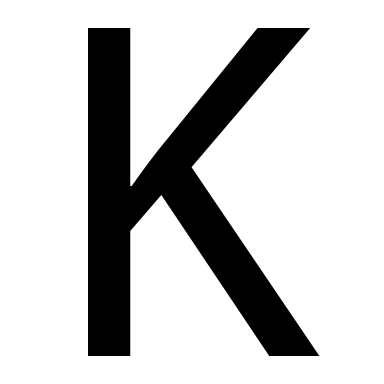
<style>
.page{position:relative;width:384px;height:384px;background:#ffffff}
.page>*{position:absolute;margin:0}
.t1{font:486.1px "MyriadPro-Regular";color:#000000}
</style>
<div class="page">
<p class="t1" style="left:88px;top:28px;width:232px;height:328px">K</p>
</div>
